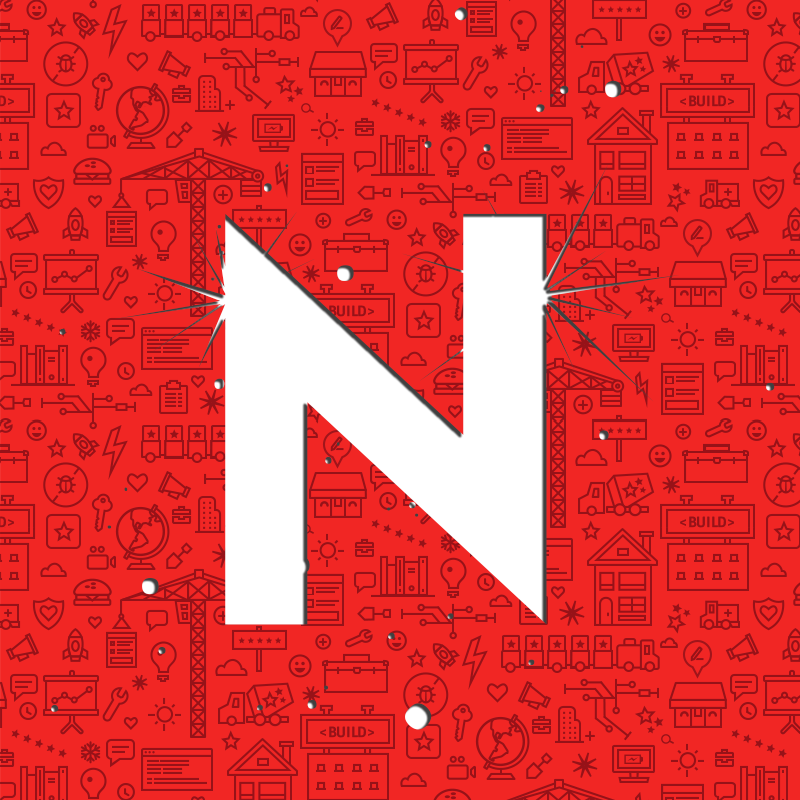
<style>
.page{position:relative;width:800px;height:800px;background:#f12624}
.page>*{position:absolute;margin:0}
.t1{font:784.5px "Snowinter-Free";color:#ffffff}
</style>
<div class="page">
<p class="t1" style="left:51px;top:7px;width:724px;height:723px">N</p>
</div>
